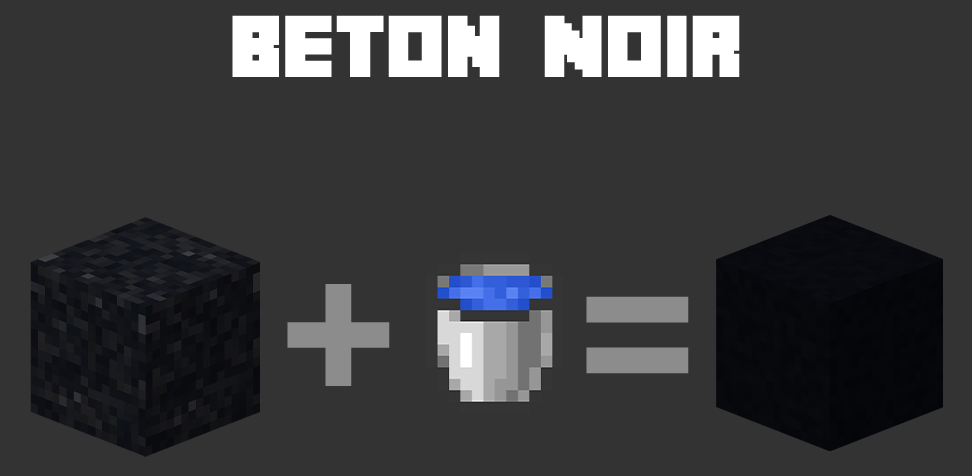
<style>
.page{position:relative;width:972px;height:476px;background:#333333}
.page>*{position:absolute;margin:0}
.t1{font:78px "Minecrafter";color:#ffffff}
.t2{font:203.2px "Minecraft";color:#8c8c8c}
</style>
<div class="page">
<p class="t1" style="left:232px;top:15px;width:508px;height:62px">Beton Noir</p>
<p class="t2" style="left:287px;top:284px;width:103px;height:102px">+</p>
<p class="t2" style="left:586px;top:296px;width:103px;height:78px">=</p>
</div>
